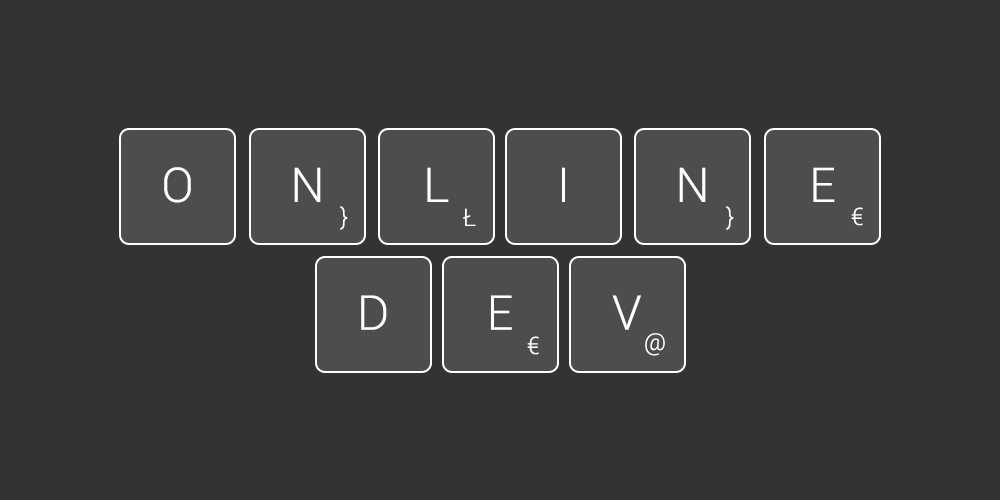
<style>
.page{position:relative;width:1000px;height:500px;background:#333333}
.page>*{position:absolute;margin:0}
.t1{font:48px "Roboto-Light";color:#ffffff}
.t2{font:24px "Roboto-Light";color:#ffffff}
</style>
<div class="page">
<p class="t1" style="left:164px;top:167px;width:27px;height:36px">O</p>
<p class="t1" style="left:294px;top:167px;width:27px;height:35px">N</p>
<p class="t1" style="left:427px;top:167px;width:22px;height:35px">L</p>
<p class="t1" style="left:562px;top:167px;width:3px;height:35px">I</p>
<p class="t1" style="left:679px;top:167px;width:27px;height:35px">N</p>
<p class="t1" style="left:813px;top:167px;width:22px;height:35px">E</p>
<p class="t2" style="left:340px;top:206px;width:8px;height:24px">}</p>
<p class="t2" style="left:463px;top:208px;width:13px;height:18px">Ł</p>
<p class="t2" style="left:726px;top:206px;width:8px;height:24px">}</p>
<p class="t2" style="left:851px;top:207px;width:12px;height:19px">€</p>
<p class="t1" style="left:361px;top:295px;width:26px;height:35px">D</p>
<p class="t1" style="left:491px;top:295px;width:21px;height:35px">E</p>
<p class="t1" style="left:612px;top:295px;width:29px;height:35px">V</p>
<p class="t2" style="left:527px;top:336px;width:12px;height:19px">€</p>
<p class="t2" style="left:645px;top:333px;width:20px;height:23px">@</p>
</div>
